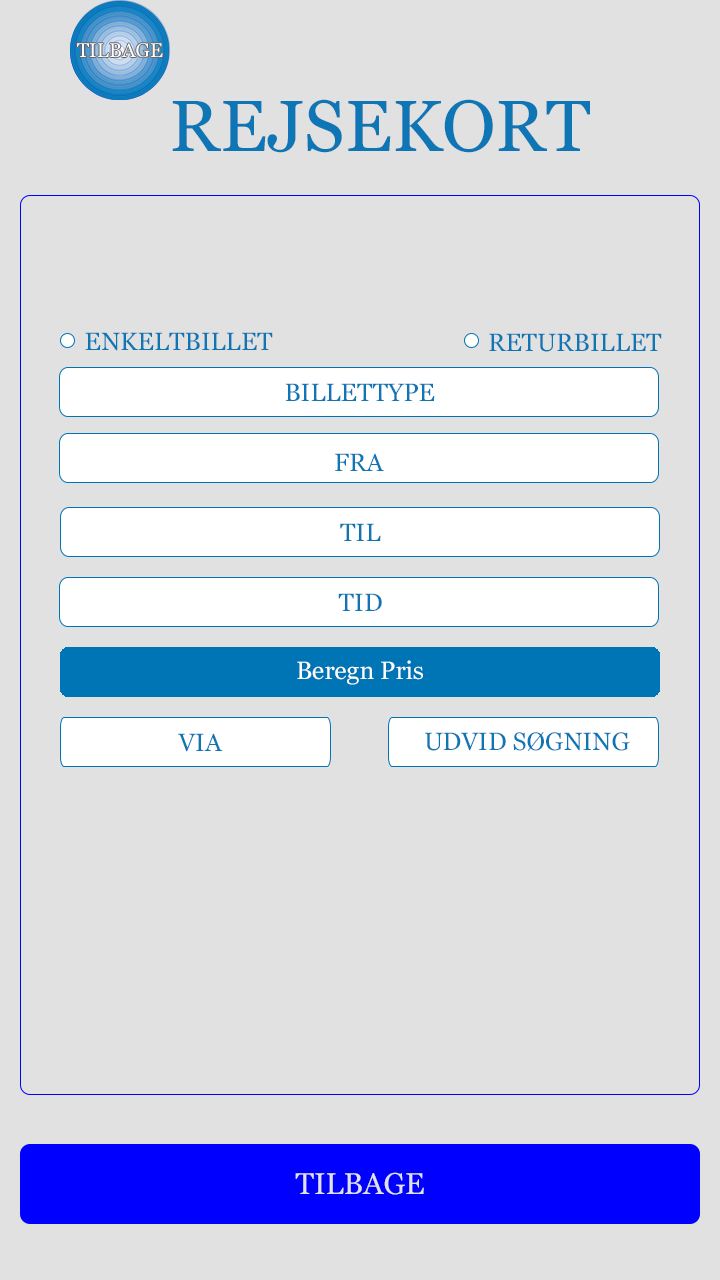
<style>
.page{position:relative;width:720px;height:1280px;background:#e1e1e1}
.page>*{position:absolute;margin:0}
.t1{font:72px "Georgia";color:#0f76b5}
.t2{font:25px "Georgia";color:#0f76b5}
.t3{font:25px "Georgia";color:#ffffff}
.t4{font:30px "Georgia";color:#e1e1e1}
</style>
<div class="page">
<p class="t1" style="left:172px;top:99px;width:418px;height:54px">REJSEKORT</p>
<p class="t2" style="left:85px;top:332px;width:188px;height:19px">ENKELTBILLET</p>
<p class="t2" style="left:489px;top:333px;width:173px;height:19px">RETURBILLET</p>
<p class="t2" style="left:285px;top:383px;width:150px;height:18px">BILLETTYPE</p>
<p class="t2" style="left:335px;top:453px;width:49px;height:18px">FRA</p>
<p class="t2" style="left:340px;top:523px;width:41px;height:18px">TIL</p>
<p class="t2" style="left:338px;top:593px;width:44px;height:18px">TID</p>
<p class="t3" style="left:297px;top:660px;width:126px;height:25px">Beregn Pris</p>
<p class="t2" style="left:178px;top:733px;width:45px;height:19px">VIA</p>
<p class="t2" style="left:425px;top:732px;width:205px;height:19px">UDVID SØGNING</p>
<p class="t4" style="left:295px;top:1172px;width:129px;height:23px">TILBAGE</p>
</div>
